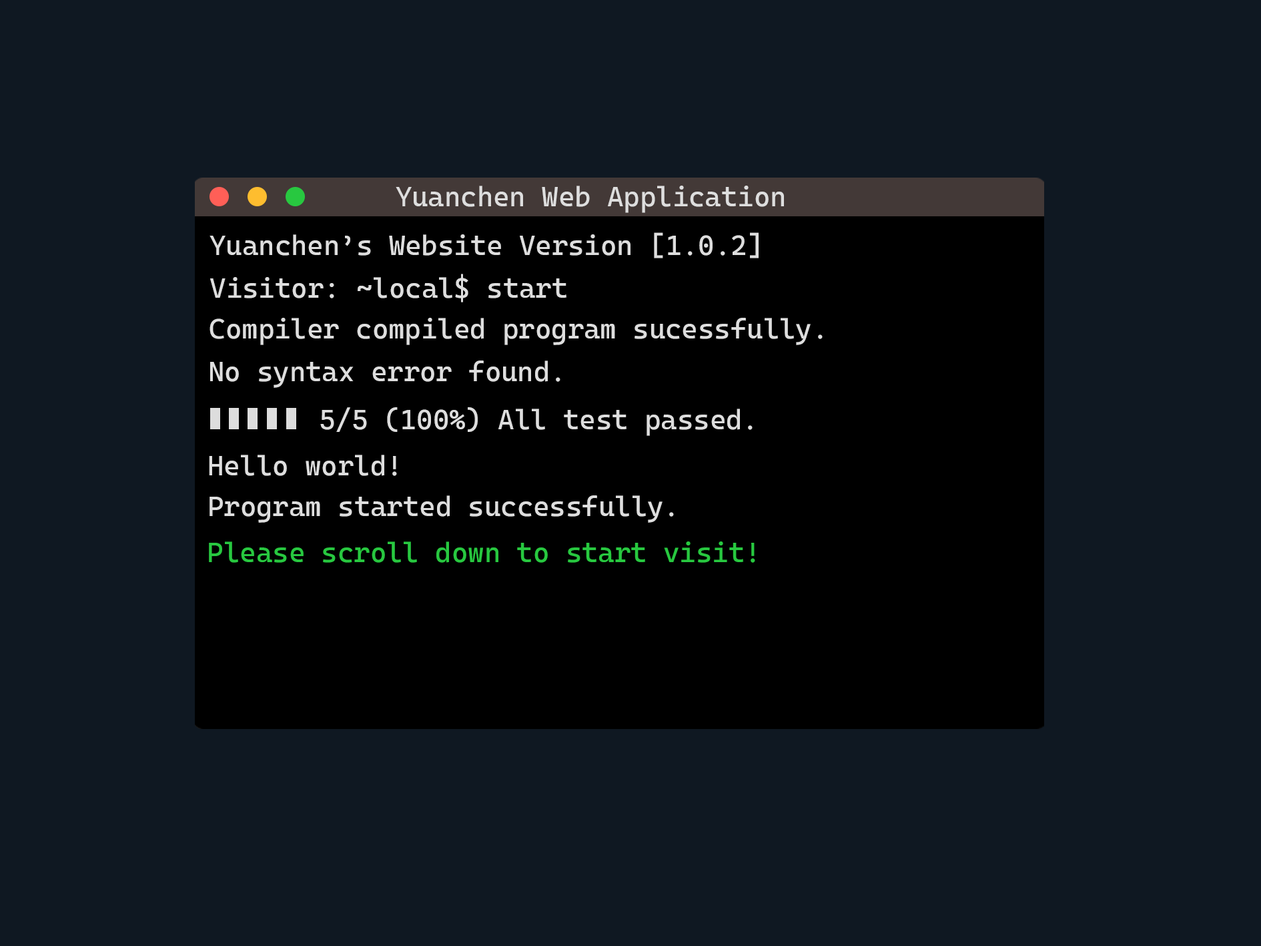
<style>
.page{position:relative;width:1261px;height:946px;background:#0f1822}
.page>*{position:absolute;margin:0}
.t1{font:27.8px "CascadiaCode-Roman";color:#dedede;font-weight:bold}
.t2{font:27.8px "CascadiaCode-Roman";color:#28c840;font-weight:bold}
</style>
<div class="page">
<p class="t1" style="left:396px;top:186px;width:388px;height:27px">Yuanchen Web Application</p>
<p class="t1" style="left:210px;top:232px;width:549px;height:26px">Yuanchen’s Website Version [1.0.2]</p>
<p class="t1" style="left:210px;top:274px;width:357px;height:28px">Visitor: ~local$ start</p>
<p class="t1" style="left:210px;top:318px;width:613px;height:27px">Compiler compiled program sucessfully.</p>
<p class="t1" style="left:210px;top:360px;width:351px;height:28px">No syntax error found.</p>
<p class="t1" style="left:320px;top:407px;width:433px;height:29px">5/5 (100%) All test passed.</p>
<p class="t1" style="left:209px;top:454px;width:188px;height:22px">Hello world!</p>
<p class="t1" style="left:210px;top:495px;width:464px;height:27px">Program started successfully.</p>
<p class="t2" style="left:209px;top:541px;width:546px;height:22px">Please scroll down to start visit!</p>
</div>
